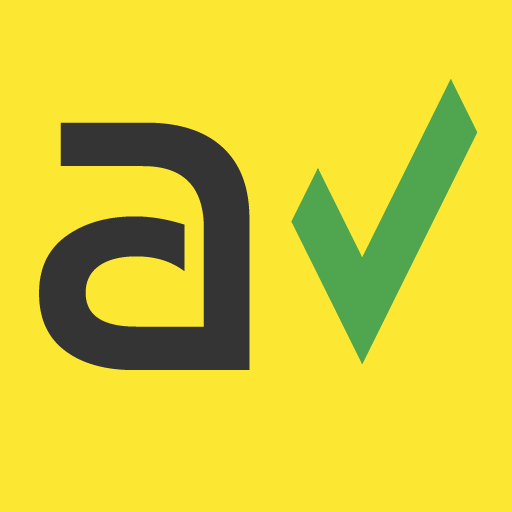
<style>
.page{position:relative;width:512px;height:512px;background:#fce833}
.page>*{position:absolute;margin:0}
.t1{font:515px "Baumans-Regular";letter-spacing:0.1em;color:#343434}
</style>
<div class="page">
<p class="t1" style="left:39px;top:122px;width:211px;height:248px">a</p>
</div>
